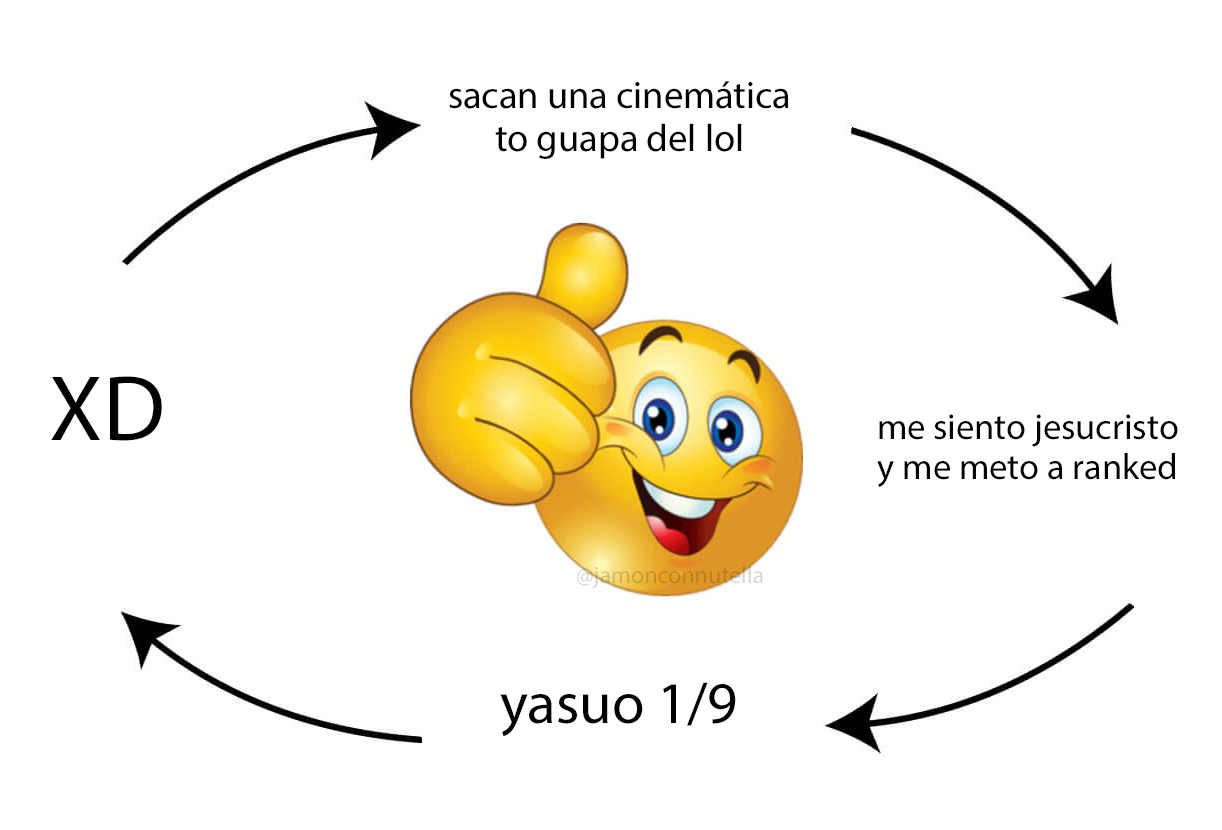
<style>
.page{position:relative;width:1222px;height:830px;background:#ffffff}
.page>*{position:absolute;margin:0}
.t1{font:38.5px "MyriadPro-Regular";color:#000000}
.t2{font:93.4px "MyriadPro-Regular";color:#000000}
.t3{font:36.5px "MyriadPro-Regular";color:#000000}
.t4{font:24px "MyriadPro-Regular"}
.t5{font:59.1px "MyriadPro-Regular";color:#000000}
</style>
<div class="page">
<p class="t1" style="left:449px;top:81px;width:340px;height:78px;text-align:center">sacan una cinemática<br>to guapa del lol</p>
<p class="t2" style="left:51px;top:376px;width:111px;height:65px">XD</p>
<p class="t3" style="left:877px;top:414px;width:301px;height:73px;text-align:center">me siento jesucristo<br>y me meto a ranked</p>
<p class="t4" style="left:577px;top:566px;width:186px;height:22px">@jamonconnutella</p>
<p class="t5" style="left:500px;top:682px;width:236px;height:55px">yasuo 1/9</p>
</div>
